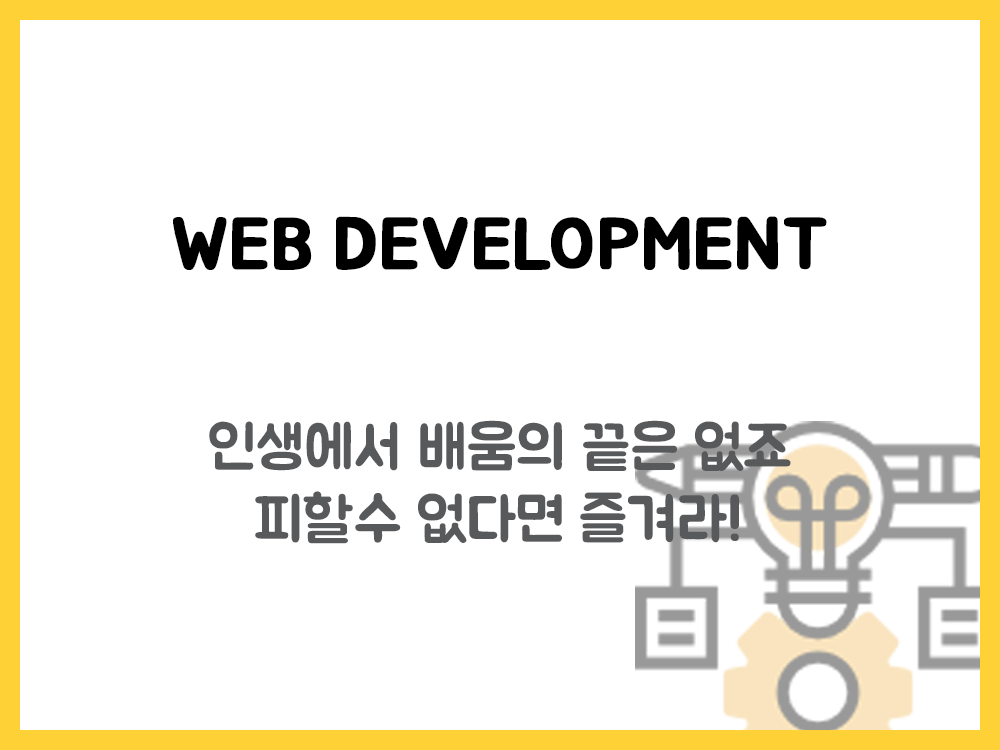
<style>
.page{position:relative;width:1000px;height:750px;background:#ffffff}
.page>*{position:absolute;margin:0}
.t1{font:72px "BMJUA";color:#000000;font-weight:bold}
.t2{font:60px "BMJUA";color:#58595b}
</style>
<div class="page">
<p class="t1" style="left:173px;top:216px;width:654px;height:54px">WEB DEVELOPMENT</p>
<p class="t2" style="left:209px;top:420px;width:582px;height:124px;text-align:center">인생에서 배움의 끝은 없죠<br>피할수 없다면 즐겨라!</p>
</div>
